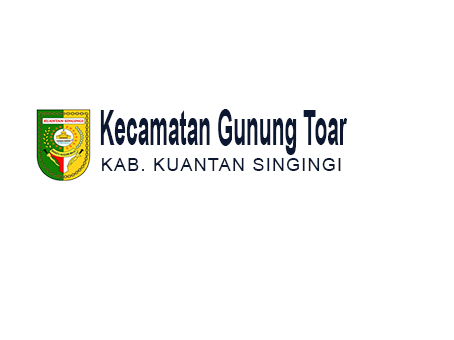
<style>
.page{position:relative;width:454px;height:340px;background:#ffffff}
.page>*{position:absolute;margin:0}
.t1{font:48.4px "Arial-BoldMT";letter-spacing:0.005em;color:#0c1832;scale:0.43 1}
.t2{font:18px "ArialMT";letter-spacing:0.068em;color:#0c1832}
</style>
<div class="page">
<p class="t1" style="left:100px;top:109px;width:248px;height:46px">Kecamatan Gunung Toar</p>
<p class="t2" style="left:102px;top:158px;width:239px;height:13px">KAB. KUANTAN SINGINGI</p>
</div>
